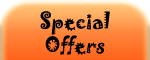
<style>
.page{position:relative;width:150px;height:60px}
.page>*{position:absolute;margin:0}
.t1{font:20px "Jokerman-Regular";color:#000000}
.t2{font:5px "Jokerman-Regular";color:#000000}
</style>
<div class="page">
<p class="t1" style="left:40px;top:11px;width:70px;height:44px;text-align:center"><span class="t2"><br></span>Special<br>Offers</p>
</div>
